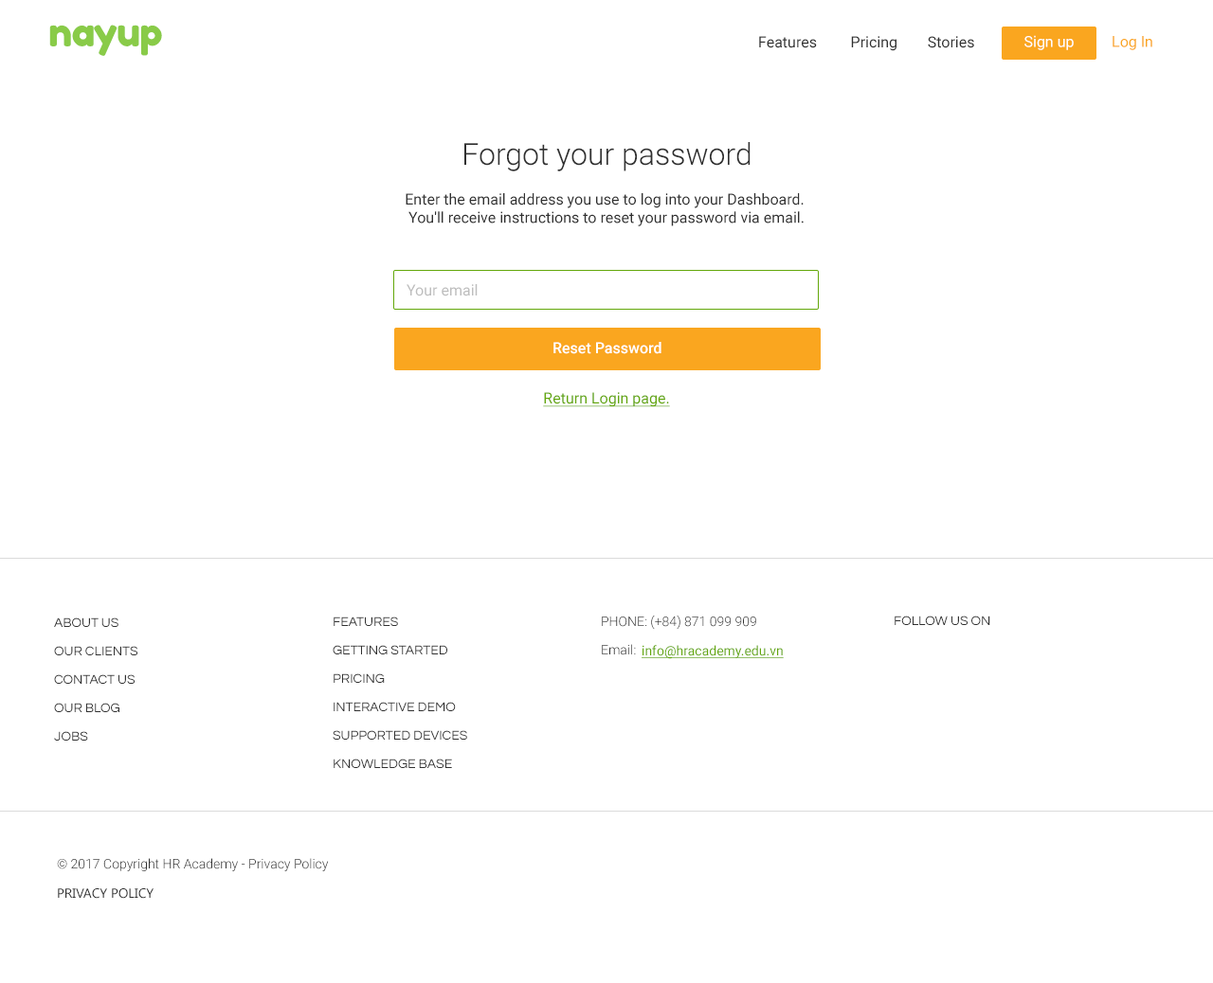
<style>
.page{position:relative;width:1213px;height:983px;background:#ffffff}
.page>*{position:absolute;margin:0}
.t1{font:39.8px "FredokaOne-Regular";letter-spacing:-0.025em;color:#89cb48}
.t2{font:15.2px "Roboto-Regular";color:#303030}
.t3{font:30.3px "Roboto-Light";color:#303030}
.t4{font:15.2px "Roboto-Regular";color:#bebebe}
.t5{font:15.2px "Roboto-Medium";color:#ffffff}
.t6{font:15.2px "Roboto-Regular";color:#63a70a;text-decoration:underline}
.t7{font:13.3px/28.4px "Questrial-Regular";color:#303030;text-transform:uppercase}
.t8{font:13.3px/28.4px "Roboto-Light";color:#303030;text-transform:uppercase}
.t9{font:13.3px/28.4px "Roboto-Light";color:#303030}
.t10{font:13.3px "Questrial-Regular";color:#303030;text-transform:uppercase}
.t11{font:13.3px "Roboto-Regular";color:#63a70a;text-decoration:underline}
.t12{font:13.3px "Roboto-Light";color:#303030}
.t13{font:13.3px "Gadugi";color:#303030;text-transform:uppercase}
</style>
<div class="page">
<p class="t1" style="left:49px;top:25px;width:113px;height:31px">nayup</p>
<p class="t2" style="left:759px;top:36px;width:215px;height:15px">Features         Pricing        Stories</p>
<p class="t3" style="left:464px;top:142px;width:286px;height:29px">Forgot your password</p>
<p class="t2" style="left:405px;top:193px;width:398px;height:33px;text-align:center">Enter the email address you use to log into your Dashboard. <br>You'll receive instructions to reset your password via email.</p>
<p class="t4" style="left:406px;top:284px;width:71px;height:13px">Your email</p>
<p class="t5" style="left:553px;top:342px;width:108px;height:12px">Reset Password</p>
<p class="t6" style="left:543px;top:392px;width:127px;height:15px">Return Login page.</p>
<p class="t7" style="left:54px;top:618px;width:83px;height:123px">About Us<br>Our Clients<br>Contact Us<br>Our Blog<br>Jobs</p>
<p class="t7" style="left:333px;top:617px;width:134px;height:151px">Features<br>Getting Started<br>Pricing<br>Interactive Demo<br>Supported Devices<br>Knowledge Base</p>
<p class="t8" style="left:602px;top:615px;width:154px;height:41px">Phone: (+84) 871 099 909<br><span class="t9">Email:</span></p>
<p class="t10" style="left:894px;top:616px;width:96px;height:9px">Follow us on</p>
<p class="t11" style="left:641px;top:645px;width:142px;height:14px">info@hracademy.edu.vn</p>
<p class="t12" style="left:57px;top:858px;width:272px;height:14px">© 2017 Copyright HR Academy - Privacy Policy</p>
<p class="t13" style="left:58px;top:889px;width:95px;height:10px">Privacy Policy</p>
</div>
